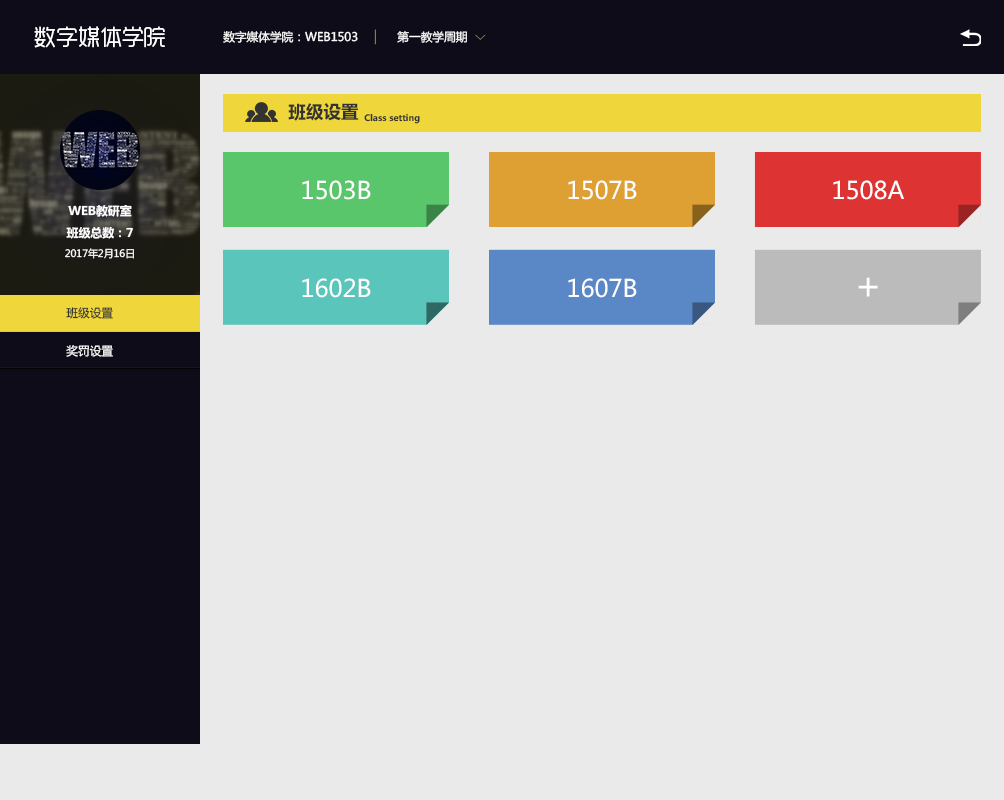
<style>
.page{position:relative;width:1004px;height:800px;background:#eaeaea}
.page>*{position:absolute;margin:0}
.t1{font:22.1px "RTWSYueGoTrial-Regular";color:#ffffff}
.t2{font:11.8px "MicrosoftYaHei";color:#ffffff}
.t3{font:17.7px "MicrosoftYaHei-Bold";color:#333333}
.t4{font:8.9px "MicrosoftYaHei-Bold";color:#333333}
.t5{font:24px "MicrosoftYaHei";color:#ffffff}
.t6{font:12px "MicrosoftYaHei-Bold";color:#ffffff}
.t7{font:10px "MicrosoftYaHei";color:#ffffff}
.t8{font:37.6px "MicrosoftYaHei";color:#ffffff}
.t9{font:11.8px "MicrosoftYaHei";color:#333333}
</style>
<div class="page">
<p class="t1" style="left:34px;top:26px;width:131px;height:22px">数字媒体学院</p>
<p class="t2" style="left:223px;top:31px;width:135px;height:12px">数字媒体学院：WEB1503</p>
<p class="t2" style="left:397px;top:31px;width:70px;height:12px">第一教学周期</p>
<p class="t3" style="left:288px;top:103px;width:71px;height:18px">班级设置</p>
<p class="t4" style="left:364px;top:113px;width:56px;height:11px">Class setting</p>
<p class="t5" style="left:302px;top:180px;width:69px;height:20px">1503B</p>
<p class="t5" style="left:568px;top:180px;width:69px;height:20px">1507B</p>
<p class="t5" style="left:833px;top:180px;width:71px;height:20px">1508A</p>
<p class="t6" style="left:68px;top:205px;width:64px;height:12px">WEB教研室</p>
<p class="t6" style="left:66px;top:226px;width:67px;height:13px">班级总数：7</p>
<p class="t7" style="left:65px;top:248px;width:69px;height:11px">2017年2月16日</p>
<p class="t5" style="left:302px;top:278px;width:69px;height:20px">1602B</p>
<p class="t5" style="left:568px;top:278px;width:69px;height:20px">1607B</p>
<p class="t8" style="left:858px;top:277px;width:20px;height:20px">+</p>
<p class="t9" style="left:66px;top:307px;width:47px;height:12px">班级设置</p>
<p class="t2" style="left:66px;top:345px;width:47px;height:12px">奖罚设置</p>
</div>
